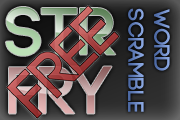
<style>
.page{position:relative;width:180px;height:120px}
.page>*{position:absolute;margin:0}
.t1{font:67.1px "Code-Bold"}
.t2{font:22.4px "Code-Bold"}
</style>
<div class="page">
<p class="t1" style="left:6px;top:7px;width:110px;height:49px">Str</p>
<p class="t2" style="left:128px;top:8px;width:16px;height:104px;rotate:90deg">Scramble</p>
<p class="t2" style="left:154px;top:9px;width:16px;height:62px;rotate:90deg">Word</p>
<p class="t1" style="left:9px;top:66px;width:103px;height:48px">FRY</p>
</div>
